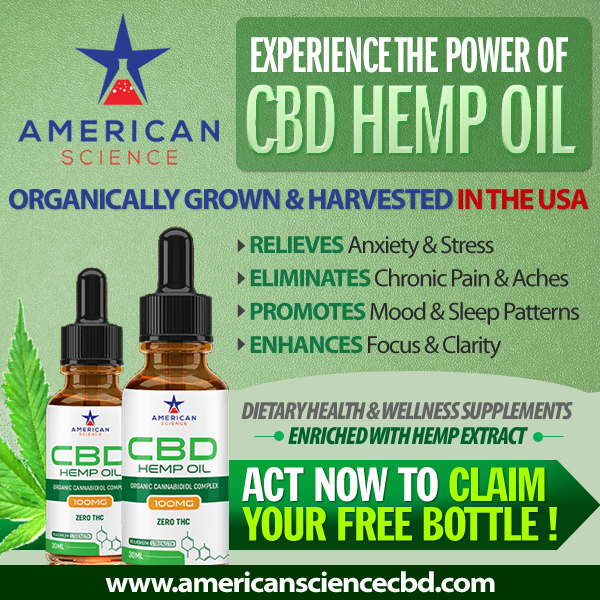
<style>
.page{position:relative;width:600px;height:600px}
.page>*{position:absolute;margin:0}
.t1{font:52.1px "FranklinGothicLT-DemiXCmpr";letter-spacing:-0.025em;color:#ffffff;text-transform:uppercase}
.t2{font:104.2px "FranklinGothicLT-DemiXCmpr";letter-spacing:-0.035em;color:#cefabc}
.t3{font:29.2px "MyriadPro-Bold";letter-spacing:-0.05em;color:#2b3f91;text-transform:uppercase}
.t4{font:29.2px "MyriadPro-Bold";letter-spacing:-0.05em;color:#c50505;text-transform:uppercase}
.t5{font:25px/33.3px "MyriadPro-Regular";letter-spacing:-0.05em;color:#27282a}
.t6{font:25px/33.3px "MyriadPro-Bold";letter-spacing:-0.05em;color:#107745;text-transform:uppercase}
.t7{font:25px/25px "MyriadPro-BlackCondIt";letter-spacing:-0.05em;color:#656464}
.t8{font:25px/25px "MyriadPro-BlackCondIt";letter-spacing:-0.05em;color:#00612f}
.t9{font:45.8px/39.6px "FranklinGoth-ExtCondensed";letter-spacing:-0.05em;color:#a9ff00;text-transform:uppercase}
.t10{font:45.8px/39.6px "FranklinGoth-ExtCondensed";letter-spacing:-0.05em;color:#ffffff;text-transform:uppercase}
.t11{font:29.2px "MyriadPro-BoldSemiExt";letter-spacing:-0.05em;color:#ffffff}
</style>
<div class="page">
<p class="t1" style="left:251px;top:37px;width:317px;height:36px">Experience The Power Of</p>
<p class="t2" style="left:246px;top:84px;width:331px;height:72px">CBD HEMP OIL</p>
<p class="t3" style="left:9px;top:189px;width:580px;height:21px">Organically Grown &amp; Harvested <span class="t4">In The USA</span></p>
<p class="t5" style="left:250px;top:236px;width:329px;height:123px"><span class="t6">Relieves </span>Anxiety &amp; Stress<br><span class="t6">Eliminates </span>Chronic Pain &amp; Aches<br><span class="t6">Promotes </span>Mood &amp; Sleep Patterns<br><span class="t6">Enhances </span>Focus &amp; Clarity</p>
<p class="t7" style="left:241px;top:402px;width:332px;height:43px">DIETARY HEALTH &amp; WELLNESS SUPPLEMENTS<br>                  <span class="t8">   ENRICHED WITH HEMP EXTRACT</span></p>
<p class="t9" style="left:242px;top:467px;width:315px;height:74px"><span class="t10">Act Now To </span>Claim <br>Your Free Bottle !</p>
<p class="t11" style="left:105px;top:571px;width:390px;height:22px">www.americansciencecbd.com</p>
</div>
